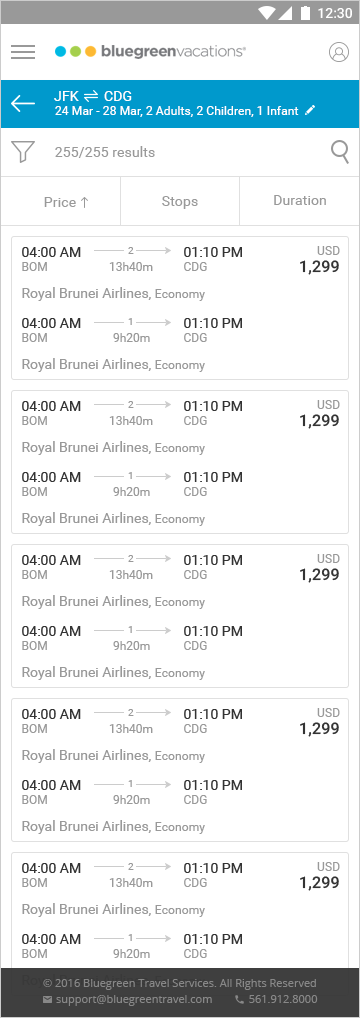
<style>
.page{position:relative;width:360px;height:1018px;background:#ffffff}
.page>*{position:absolute;margin:0}
.t1{font:14px "Roboto-Regular";letter-spacing:0.01em;color:#ffffff}
.t2{font:12px "Roboto-Regular";letter-spacing:0.01em;color:#ffffff}
.t3{font:14px "Roboto-Regular";letter-spacing:0.01em;color:#999999}
.t4{font:12px "Roboto-Regular";letter-spacing:0.01em;color:#999999}
.t5{font:14px "Roboto-Regular";color:#333333}
.t6{font:12px "Roboto-Regular";color:#999999}
.t7{font:10px "Roboto-Regular";color:#999999}
.t8{font:16px "Roboto-Medium";letter-spacing:0.01em;color:#333333}
.t9{font:14px "Roboto-Regular";color:#999999}
.t10{font:10px "Roboto-Regular"}
</style>
<div class="page">
<p class="t1" style="left:54px;top:91px;width:78px;height:10px">JFK       CDG</p>
<p class="t2" style="left:55px;top:106px;width:244px;height:11px"><span class="t1"><br></span>24 Mar - 28 Mar, 2 Adults, 2 Children, 1 Infant</p>
<p class="t3" style="left:55px;top:146px;width:100px;height:12px">255/255 results</p>
<p class="t3" style="left:44px;top:197px;width:32px;height:10px">Price</p>
<p class="t3" style="left:162px;top:196px;width:36px;height:13px">Stops</p>
<p class="t3" style="left:274px;top:195px;width:52px;height:10px">Duration</p>
<p class="t4" style="left:317px;top:246px;width:23px;height:9px">USD</p>
<p class="t5" style="left:22px;top:247px;width:59px;height:24px">04:00 AM<br><span class="t6">BOM</span></p>
<p class="t7" style="left:128px;top:247px;width:6px;height:7px">2</p>
<p class="t5" style="left:184px;top:247px;width:58px;height:24px">01:10 PM<br><span class="t6">CDG</span></p>
<p class="t6" style="left:109px;top:262px;width:44px;height:9px">13h40m</p>
<p class="t8" style="left:300px;top:260px;width:39px;height:15px">1,299</p>
<p class="t9" style="left:22px;top:287px;width:183px;height:14px">Royal Brunei Airlines, <span class="t4">Economy</span></p>
<p class="t5" style="left:22px;top:318px;width:59px;height:24px">04:00 AM<br><span class="t6">BOM</span></p>
<p class="t10" style="left:128px;top:318px;width:4px;height:7px">1</p>
<p class="t5" style="left:184px;top:318px;width:58px;height:24px">01:10 PM<br><span class="t6">CDG</span></p>
<p class="t6" style="left:113px;top:333px;width:37px;height:9px">9h20m</p>
<p class="t9" style="left:22px;top:358px;width:183px;height:14px">Royal Brunei Airlines, <span class="t4">Economy</span></p>
<p class="t5" style="left:22px;top:401px;width:59px;height:24px">04:00 AM<br><span class="t6">BOM</span></p>
<p class="t7" style="left:128px;top:401px;width:6px;height:7px">2</p>
<p class="t5" style="left:184px;top:401px;width:58px;height:24px">01:10 PM<br><span class="t6">CDG</span></p>
<p class="t4" style="left:317px;top:400px;width:23px;height:9px">USD</p>
<p class="t8" style="left:300px;top:414px;width:39px;height:15px">1,299</p>
<p class="t6" style="left:109px;top:416px;width:44px;height:9px">13h40m</p>
<p class="t9" style="left:22px;top:441px;width:183px;height:14px">Royal Brunei Airlines, <span class="t4">Economy</span></p>
<p class="t5" style="left:22px;top:472px;width:59px;height:24px">04:00 AM<br><span class="t6">BOM</span></p>
<p class="t10" style="left:128px;top:472px;width:4px;height:7px">1</p>
<p class="t5" style="left:184px;top:472px;width:58px;height:24px">01:10 PM<br><span class="t6">CDG</span></p>
<p class="t6" style="left:113px;top:487px;width:37px;height:9px">9h20m</p>
<p class="t9" style="left:22px;top:512px;width:183px;height:14px">Royal Brunei Airlines, <span class="t4">Economy</span></p>
<p class="t5" style="left:22px;top:555px;width:59px;height:24px">04:00 AM<br><span class="t6">BOM</span></p>
<p class="t7" style="left:128px;top:555px;width:6px;height:7px">2</p>
<p class="t5" style="left:184px;top:555px;width:58px;height:24px">01:10 PM<br><span class="t6">CDG</span></p>
<p class="t4" style="left:317px;top:554px;width:23px;height:9px">USD</p>
<p class="t8" style="left:300px;top:568px;width:39px;height:15px">1,299</p>
<p class="t6" style="left:109px;top:570px;width:44px;height:9px">13h40m</p>
<p class="t9" style="left:22px;top:595px;width:183px;height:14px">Royal Brunei Airlines, <span class="t4">Economy</span></p>
<p class="t5" style="left:22px;top:626px;width:59px;height:24px">04:00 AM<br><span class="t6">BOM</span></p>
<p class="t10" style="left:128px;top:626px;width:4px;height:7px">1</p>
<p class="t5" style="left:184px;top:626px;width:58px;height:24px">01:10 PM<br><span class="t6">CDG</span></p>
<p class="t6" style="left:113px;top:641px;width:37px;height:9px">9h20m</p>
<p class="t9" style="left:22px;top:666px;width:183px;height:14px">Royal Brunei Airlines, <span class="t4">Economy</span></p>
<p class="t5" style="left:22px;top:709px;width:59px;height:24px">04:00 AM<br><span class="t6">BOM</span></p>
<p class="t7" style="left:128px;top:709px;width:6px;height:7px">2</p>
<p class="t5" style="left:184px;top:709px;width:58px;height:24px">01:10 PM<br><span class="t6">CDG</span></p>
<p class="t4" style="left:317px;top:708px;width:23px;height:9px">USD</p>
<p class="t6" style="left:109px;top:724px;width:44px;height:9px">13h40m</p>
<p class="t8" style="left:300px;top:722px;width:39px;height:15px">1,299</p>
<p class="t9" style="left:22px;top:749px;width:183px;height:14px">Royal Brunei Airlines, <span class="t4">Economy</span></p>
<p class="t5" style="left:22px;top:780px;width:59px;height:24px">04:00 AM<br><span class="t6">BOM</span></p>
<p class="t10" style="left:128px;top:780px;width:4px;height:7px">1</p>
<p class="t5" style="left:184px;top:780px;width:58px;height:24px">01:10 PM<br><span class="t6">CDG</span></p>
<p class="t6" style="left:113px;top:795px;width:37px;height:9px">9h20m</p>
<p class="t9" style="left:22px;top:820px;width:183px;height:14px">Royal Brunei Airlines, <span class="t4">Economy</span></p>
<p class="t5" style="left:22px;top:863px;width:59px;height:24px">04:00 AM<br><span class="t6">BOM</span></p>
<p class="t7" style="left:128px;top:863px;width:6px;height:7px">2</p>
<p class="t5" style="left:184px;top:863px;width:58px;height:24px">01:10 PM<br><span class="t6">CDG</span></p>
<p class="t4" style="left:317px;top:862px;width:23px;height:9px">USD</p>
<p class="t6" style="left:109px;top:878px;width:44px;height:9px">13h40m</p>
<p class="t8" style="left:300px;top:876px;width:39px;height:15px">1,299</p>
<p class="t9" style="left:22px;top:903px;width:183px;height:14px">Royal Brunei Airlines, <span class="t4">Economy</span></p>
<p class="t5" style="left:22px;top:934px;width:59px;height:24px">04:00 AM<br><span class="t6">BOM</span></p>
<p class="t10" style="left:128px;top:934px;width:4px;height:7px">1</p>
<p class="t5" style="left:184px;top:934px;width:58px;height:24px">01:10 PM<br><span class="t6">CDG</span></p>
<p class="t6" style="left:113px;top:949px;width:37px;height:9px">9h20m</p>
</div>
